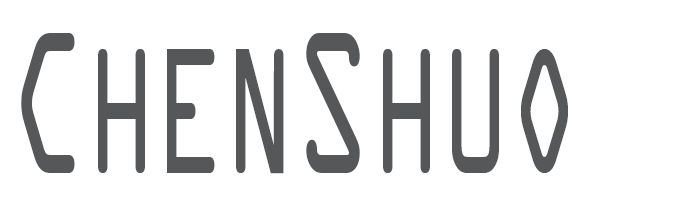
<style>
.page{position:relative;width:683px;height:203px;background:#ffffff}
.page>*{position:absolute;margin:0}
.t1{font:160px "OCRAStd";color:#555758;scale:0.6 1}
.t2{font:180px "OCRAStd";color:#555758;scale:0.6 1}
</style>
<div class="page">
<p class="t1" style="left:21px;top:33px;width:547px;height:141px"><span class="t2">C</span>HEN<span class="t2">S</span>HUO</p>
</div>
